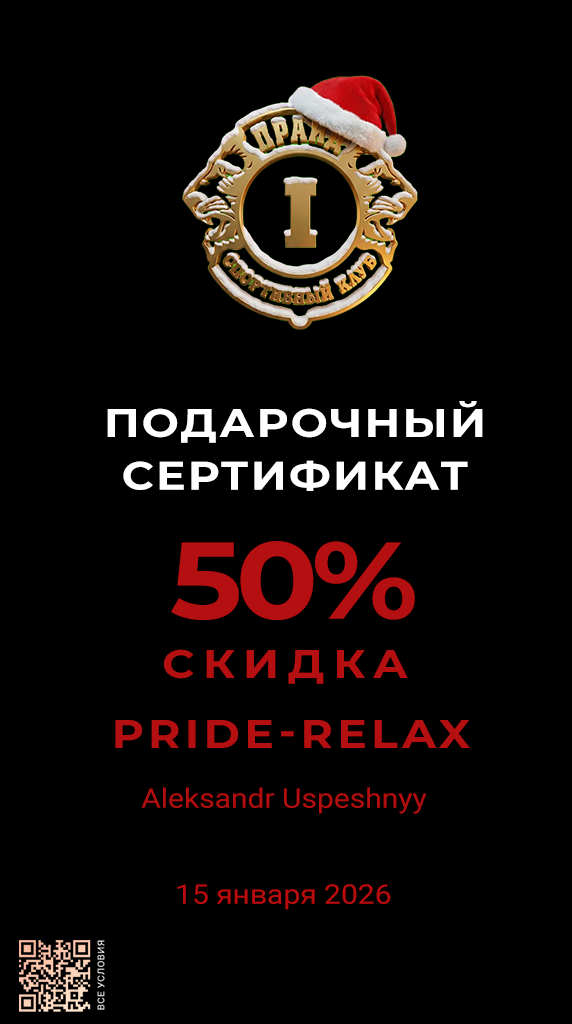
<style>
.page{position:relative;width:572px;height:1024px;background:#000000}
.page>*{position:absolute;margin:0}
.t1{font:39.6px "Montserrat-Bold";letter-spacing:0.05em;color:#ffffff;text-transform:uppercase;scale:1.11 1}
.t2{font:108.7px "Montserrat-Bold";letter-spacing:-0.05em;color:#b40f11;text-transform:uppercase;scale:1.11 1}
.t3{font:39.6px "Montserrat-Bold";letter-spacing:0.2em;color:#b40f11;text-transform:uppercase;scale:1.11 1}
.t4{font:39.6px "Montserrat-Bold";letter-spacing:0.1em;color:#b40f11;text-transform:uppercase;scale:1.11 1}
.t5{font:27px "Roboto-Regular";color:#b00e0f;scale:1.11 1}
.t6{font:27px "Roboto-Regular";color:#b80c0e;scale:1.11 1}
</style>
<div class="page">
<p class="t1" style="left:107px;top:401px;width:376px;height:90px;text-align:center">Подарочный<br>сертификат</p>
<p class="t2" style="left:171px;top:541px;width:244px;height:79px">50%</p>
<p class="t3" style="left:164px;top:649px;width:244px;height:35px">скидка</p>
<p class="t4" style="left:115px;top:720px;width:355px;height:28px">PRIDE-RELAX</p>
<p class="t5" style="left:141px;top:787px;width:286px;height:27px">Aleksandr Uspeshnyy</p>
<p class="t6" style="left:177px;top:884px;width:214px;height:26px">15 января 2026</p>
</div>
